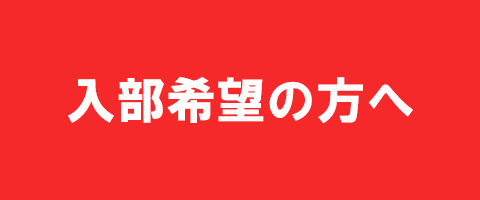
<style>
.page{position:relative;width:480px;height:200px;background:#f52929}
.page>*{position:absolute;margin:0}
.t1{font:50px "HGSSoeiKakugothicUB";color:#fffdfd}
</style>
<div class="page">
<p class="t1" style="left:68px;top:76px;width:345px;height:48px">入部希望の方へ</p>
</div>
